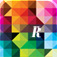
<style>
.page{position:relative;width:57px;height:57px}
.page>*{position:absolute;margin:0}
.t1{font:14.2px "BodoniBE-BoldCnItalic";color:#ffffff}
</style>
<div class="page">
<p class="t1" style="left:30px;top:26px;width:11px;height:12px">R</p>
</div>
